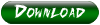
<style>
.page{position:relative;width:100px;height:25px;background:#ffffff}
.page>*{position:absolute;margin:0}
.t1{font:15px "FightingSpiritTBS";color:#ffffff}
</style>
<div class="page">
<p class="t1" style="left:14px;top:4px;width:72px;height:15px">Download</p>
</div>
